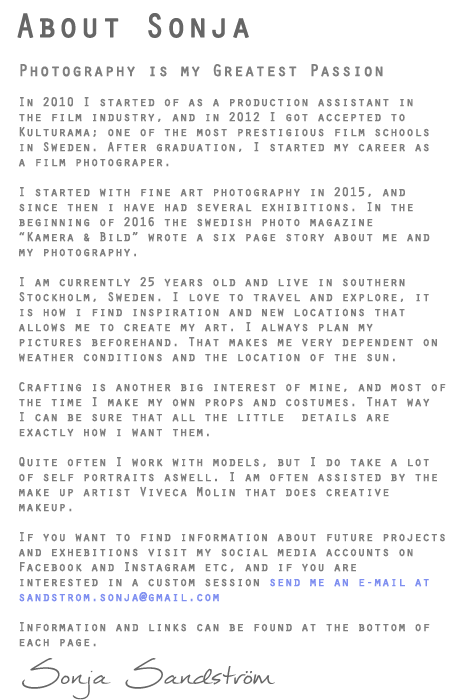
<style>
.page{position:relative;width:450px;height:700px;background:#ffffff}
.page>*{position:absolute;margin:0}
.t1{font:33.3px "Orator-Regular";color:#666666;font-weight:bold}
.t2{font:12.5px "Orator-Regular";color:#7f7f7f;font-weight:bold}
.t3{font:16.7px "Orator-Regular";color:#7f7f7f;font-weight:bold}
.t4{font:58.3px "Mathilde";color:#666666;font-style:italic}
</style>
<div class="page">
<p class="t1" style="left:17px;top:13px;width:232px;height:25px">About Sonja</p>
<p class="t2" style="left:18px;top:64px;width:428px;height:583px;text-align:right"><span class="t3">Photography is my Greatest Passion</span><br><br>In 2010 I started of as a production assistant in <br>the film industry, and in 2012 I got accepted to <br>Kulturama; one of the most prestigious film schools<br>in Sweden. After graduation, I started my career as <br>a film photograper.<br><br>I started with fine art photography in 2015, and <br>since then i have had several exhibitions. In the <br>beginning of 2016 the swedish photo magazine <br>“Kamera &amp; Bild” wrote a six page story about me and<br>my photography. <br><br>I am currently 25 years old and live in southern <br>Stockholm, Sweden. I love to travel and explore, it<br>is how i find inspiration and new locations that <br>allows me to create my art. I always plan my <br>pictures beforehand. That makes me very dependent on<br>weather conditions and the location of the sun.<br><br>Crafting is another big interest of mine, and most of<br>the time I make my own props and costumes. That way<br>I can be sure that all the little  details are <br>exactly how i want them.<br><br>Quite often I work with models, but I do take a lot<br>of self portraits aswell. I am often assisted by the<br>make up artist Viveca Molin that does creative <br>makeup.<br><br>If you want to find information about future projects<br>and exhebitions visit my social media accounts on <br>Facebook and Instagram etc, and if you are <br>interested in a custom session send me an e-mail at<br>sandstrom.sonja@gmail.com<br><br>Information and links can be found at the bottom of<br>each page.</p>
<p class="t4" style="left:22px;top:658px;width:253px;height:42px">Sonja Sandström</p>
</div>
